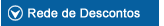
<style>
.page{position:relative;width:164px;height:26px;background:#065f9f}
.page>*{position:absolute;margin:0}
.t1{font:12px "ArialMT";letter-spacing:0.01em;color:#ffffff;font-weight:bold}
</style>
<div class="page">
<p class="t1" style="left:28px;top:8px;width:112px;height:10px">Rede de Descontos</p>
</div>
